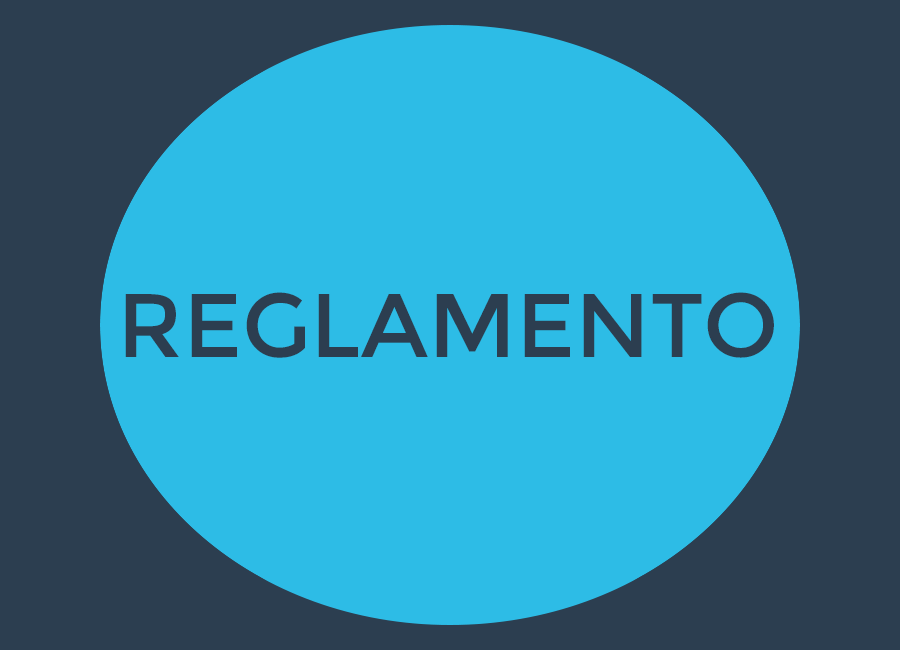
<style>
.page{position:relative;width:900px;height:650px;background:#2dbce6}
.page>*{position:absolute;margin:0}
.t1{font:90px "Montserrat-Regular";color:#2c3e50}
</style>
<div class="page">
<p class="t1" style="left:125px;top:292px;width:649px;height:66px">REGLAMENTO</p>
</div>
